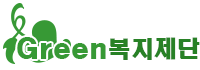
<style>
.page{position:relative;width:200px;height:70px;background:#ffffff}
.page>*{position:absolute;margin:0}
.t1{font:25px "HeadlineR-HM";color:#379935}
.t2{font:23px "HeadlineR-HM";color:#288126}
</style>
<div class="page">
<p class="t1" style="left:17px;top:37px;width:183px;height:23px">Green<span class="t2">복지제단</span></p>
</div>
